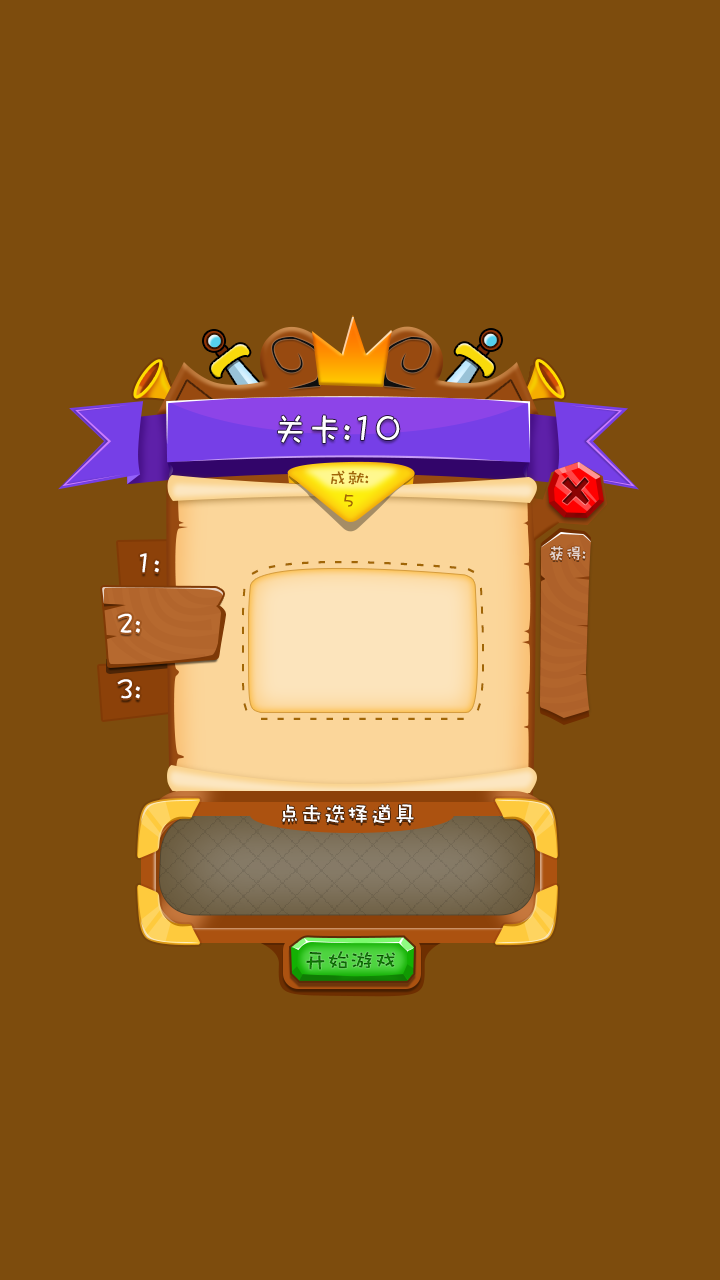
<style>
.page{position:relative;width:720px;height:1280px;background:#7d4c0d}
.page>*{position:absolute;margin:0}
.t1{font:35.4px "DFWaWaSC-W5";color:#ffffff}
.t2{font:18.2px/23.3px "DFWaWaSC-W5";color:#a16606}
.t3{font:28px "DFWaWaSC-W5";color:#ffffff}
.t4{font:17.1px "DFWaWaSC-W5";color:#e2d5cf}
.t5{font:28px/36px "DFWaWaSC-W5";color:#a16606;scale:0.88 1}
.t6{font:23.3px "DFWaWaSC-W5";color:#ffffff}
.t7{font:23.2px "DFWaWaSC-W5";color:#0f7c04}
</style>
<div class="page">
<p class="t1" style="left:277px;top:415px;width:123px;height:28px">关卡:10</p>
<p class="t2" style="left:331px;top:470px;width:38px;height:37px;text-align:center">成就:<br>5</p>
<p class="t3" style="left:140px;top:553px;width:19px;height:20px">1:</p>
<p class="t4" style="left:549px;top:546px;width:37px;height:15px">获得:</p>
<p class="t5" style="left:241px;top:561px;width:243px;height:159px;text-align:center">- - - - - - - - - - - - - - - - - - - - - - - - - - - - - - - - - - - - - - - - -</p>
<p class="t3" style="left:118px;top:613px;width:22px;height:20px">2:</p>
<p class="t3" style="left:117px;top:679px;width:23px;height:20px">3:</p>
<p class="t6" style="left:282px;top:804px;width:132px;height:19px">点击选择道具</p>
<p class="t7" style="left:306px;top:951px;width:89px;height:19px">开始游戏</p>
</div>
